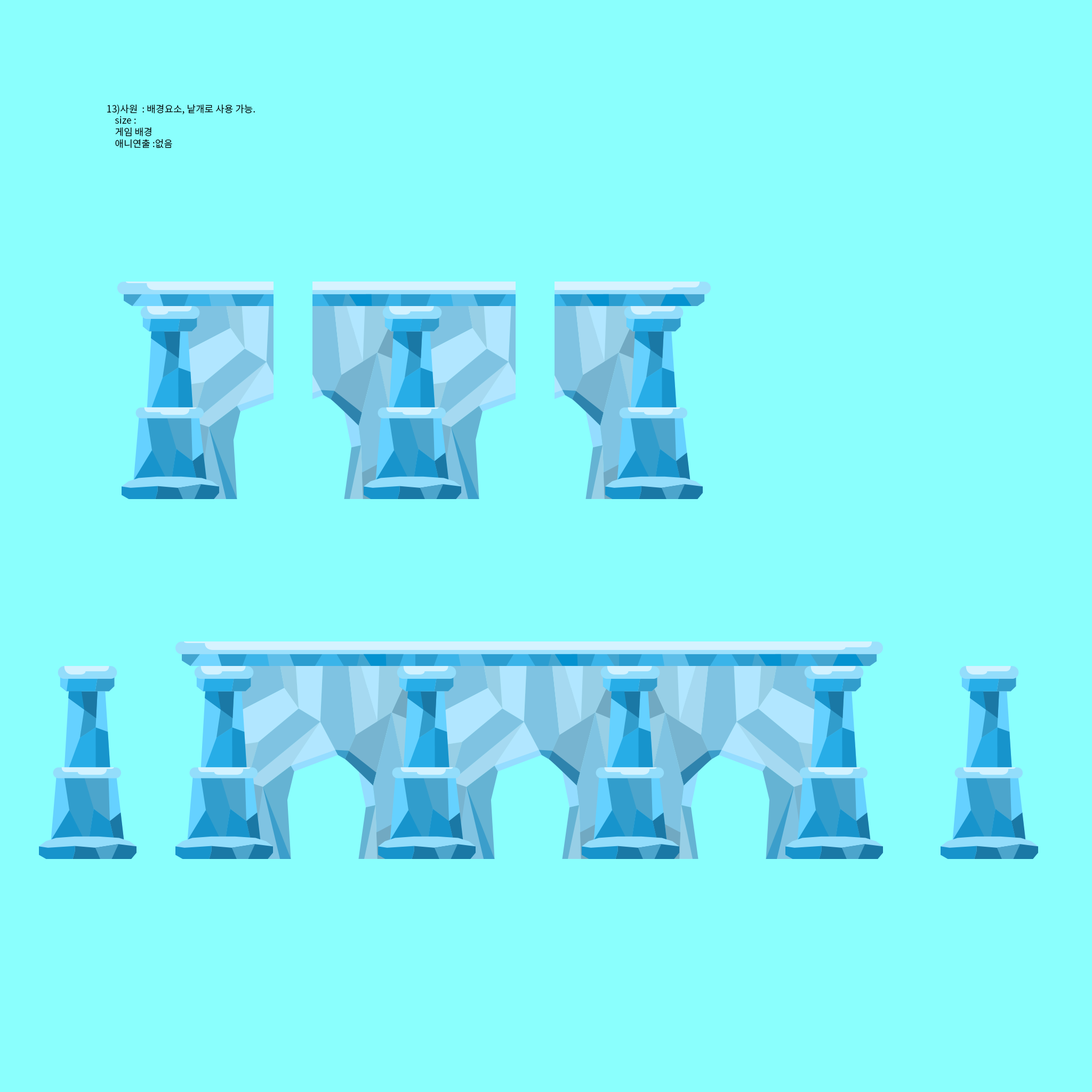
<style>
.page{position:relative;width:1092px;height:1092px;background:#8afffd}
.page>*{position:absolute;margin:0}
.t1{font:9.6px "NotoSansCJKkr-DemiLight";color:#000000}
</style>
<div class="page">
<p class="t1" style="left:107px;top:104px;width:148px;height:44px">13)사원  : 배경요소, 낱개로 사용 가능.   <br>    size : <br>    게임 배경<br>    애니연출 :없음</p>
</div>
